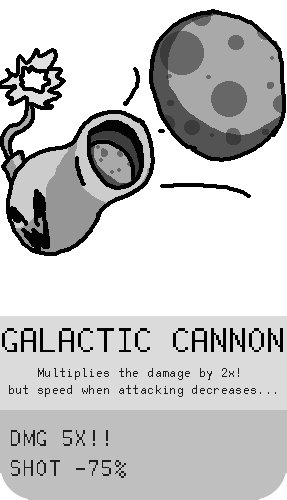
<style>
.page{position:relative;width:287px;height:500px;background:#ffffff}
.page>*{position:absolute;margin:0}
.t1{font:37.5px "FreePixel-Regular";color:#000000}
.t2{font:14.1px "FreePixel-Regular";color:#1e1e1e}
.t3{font:25px "FreePixel-Regular";color:#1e1e1e}
</style>
<div class="page">
<p class="t1" style="left:2px;top:328px;width:281px;height:24px">GALACTIC CANNON</p>
<p class="t2" style="left:9px;top:368px;width:267px;height:29px;text-align:center">Multiplies the damage by 2x! <br>but speed when attacking decreases...</p>
<p class="t3" style="left:11px;top:430px;width:115px;height:48px">DMG 5X!!<br>SHOT -75%</p>
</div>
